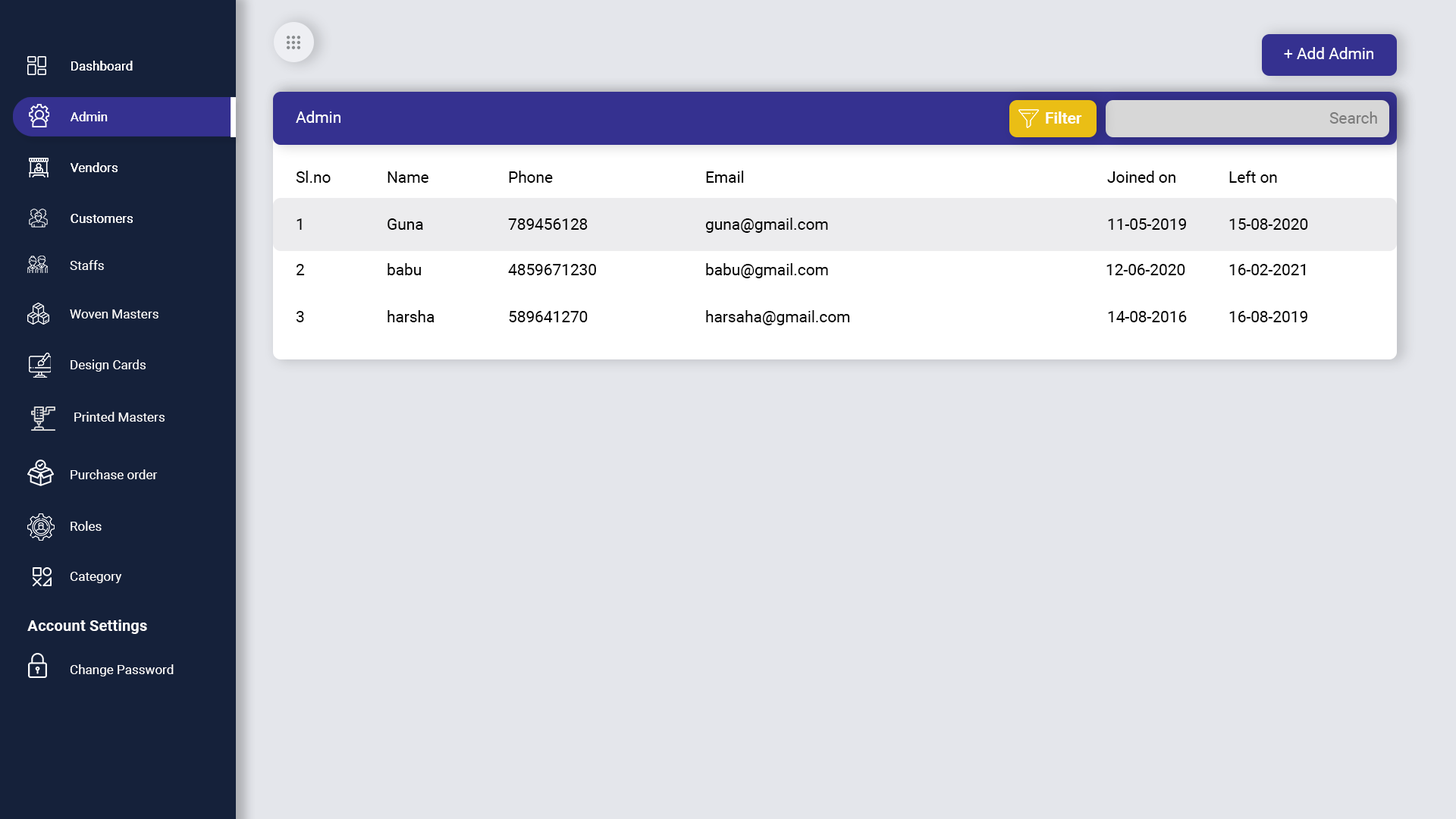
<style>
.page{position:relative;width:1456px;height:819px;background:#e4e6eb}
.page>*{position:absolute;margin:0}
.t1{font:15.8px "Roboto-Regular";color:#ffffff}
.t2{font:12.9px "Roboto-Regular";color:#ffffff}
.t3{font:15.8px "Roboto-Bold";color:#ffffff}
.t4{font:15.8px "Roboto-Regular";color:#7b7b7b}
.t5{font:15.8px "Roboto-Regular";color:#000000}
.t6{font:15.5px "Roboto-Bold";color:#ffffff}
</style>
<div class="page">
<p class="t1" style="left:1284px;top:47px;width:89px;height:12px">+ Add Admin</p>
<p class="t2" style="left:71px;top:61px;width:62px;height:10px">Dashboard</p>
<p class="t2" style="left:71px;top:61px;width:62px;height:10px">Dashboard</p>
<p class="t2" style="left:71px;top:111px;width:37px;height:10px">Admin</p>
<p class="t2" style="left:71px;top:111px;width:37px;height:10px">Admin</p>
<p class="t1" style="left:296px;top:111px;width:44px;height:12px">Admin</p>
<p class="t3" style="left:1046px;top:111px;width:36px;height:13px">Filter</p>
<p class="t4" style="left:1329px;top:111px;width:48px;height:13px">Search</p>
<p class="t2" style="left:71px;top:162px;width:47px;height:10px">Vendors</p>
<p class="t2" style="left:71px;top:162px;width:47px;height:10px">Vendors</p>
<p class="t5" style="left:296px;top:171px;width:35px;height:12px">Sl.no</p>
<p class="t5" style="left:388px;top:171px;width:40px;height:12px">Name</p>
<p class="t5" style="left:509px;top:171px;width:44px;height:12px">Phone</p>
<p class="t5" style="left:706px;top:171px;width:38px;height:12px">Email</p>
<p class="t5" style="left:1107px;top:171px;width:68px;height:12px">Joined on</p>
<p class="t5" style="left:1229px;top:171px;width:48px;height:12px">Left on</p>
<p class="t2" style="left:71px;top:214px;width:62px;height:9px">Customers</p>
<p class="t2" style="left:71px;top:214px;width:62px;height:9px">Customers</p>
<p class="t5" style="left:297px;top:218px;width:5px;height:12px">1</p>
<p class="t5" style="left:388px;top:218px;width:35px;height:12px">Guna</p>
<p class="t5" style="left:508px;top:218px;width:80px;height:12px">789456128</p>
<p class="t5" style="left:705px;top:218px;width:123px;height:15px">guna@gmail.com</p>
<p class="t5" style="left:1108px;top:218px;width:78px;height:12px">11-05-2019</p>
<p class="t5" style="left:1229px;top:218px;width:79px;height:12px">15-08-2020</p>
<p class="t2" style="left:70px;top:260px;width:34px;height:10px">Staffs</p>
<p class="t5" style="left:297px;top:264px;width:8px;height:11px">2</p>
<p class="t5" style="left:388px;top:263px;width:33px;height:12px">babu</p>
<p class="t5" style="left:508px;top:264px;width:88px;height:11px">4859671230</p>
<p class="t5" style="left:706px;top:263px;width:122px;height:15px">babu@gmail.com</p>
<p class="t5" style="left:1106px;top:264px;width:79px;height:11px">12-06-2020</p>
<p class="t5" style="left:1229px;top:264px;width:77px;height:11px">16-02-2021</p>
<p class="t2" style="left:70px;top:309px;width:88px;height:9px">Woven Masters</p>
<p class="t5" style="left:296px;top:311px;width:8px;height:11px">3</p>
<p class="t5" style="left:388px;top:310px;width:47px;height:12px">harsha</p>
<p class="t5" style="left:509px;top:311px;width:79px;height:11px">589641270</p>
<p class="t5" style="left:706px;top:310px;width:144px;height:15px">harsaha@gmail.com</p>
<p class="t5" style="left:1108px;top:311px;width:79px;height:11px">14-08-2016</p>
<p class="t5" style="left:1229px;top:311px;width:78px;height:11px">16-08-2019</p>
<p class="t2" style="left:71px;top:359px;width:75px;height:13px">Design Cards</p>
<p class="t2" style="left:74px;top:412px;width:91px;height:10px">Printed Masters</p>
<p class="t2" style="left:71px;top:469px;width:87px;height:10px">Purchase order</p>
<p class="t2" style="left:71px;top:521px;width:31px;height:10px">Roles</p>
<p class="t2" style="left:70px;top:572px;width:52px;height:11px">Category</p>
<p class="t6" style="left:27px;top:620px;width:120px;height:14px">Account Settings</p>
<p class="t2" style="left:70px;top:664px;width:104px;height:12px">Change Password</p>
</div>
